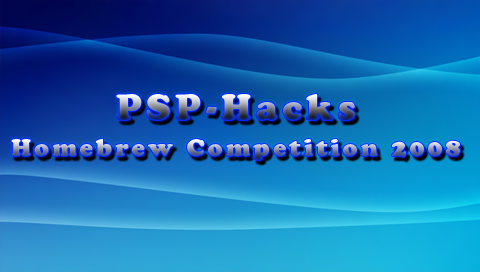
<style>
.page{position:relative;width:480px;height:272px}
.page>*{position:absolute;margin:0}
.t1{font:36px "CooperBlackStd";letter-spacing:0.125em}
.t2{font:24px "CooperBlackStd";letter-spacing:0.125em}
</style>
<div class="page">
<p class="t1" style="left:116px;top:94px;width:239px;height:27px">PSP-Hacks</p>
<p class="t2" style="left:11px;top:139px;width:449px;height:21px">Homebrew Competition 2008</p>
</div>
